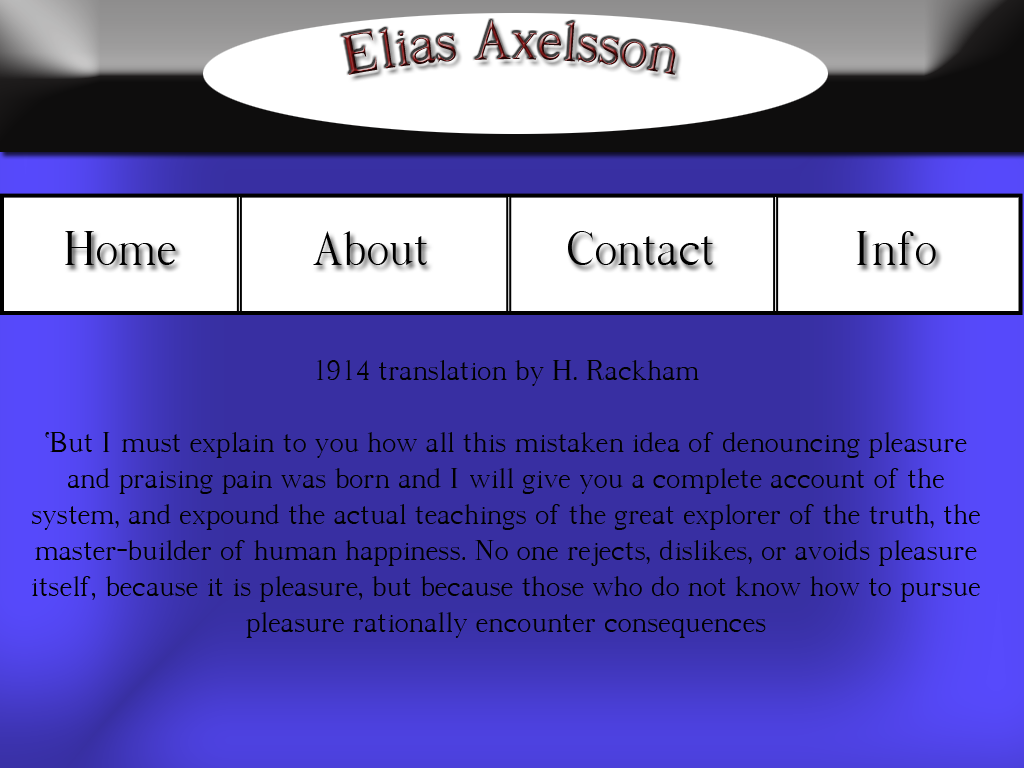
<style>
.page{position:relative;width:1024px;height:768px;background:#382fa2}
.page>*{position:absolute;margin:0}
.t1{font:56px "PanRoman"}
.t2{font:48px "PanRoman";color:#000000}
.t3{font:30px "PanRoman";color:#000000}
</style>
<div class="page">
<p class="t1" style="left:341px;top:20px;width:335px;height:55px">Elias Axelsson</p>
<p class="t2" style="left:65px;top:231px;width:111px;height:34px">Home</p>
<p class="t2" style="left:313px;top:231px;width:114px;height:34px">About</p>
<p class="t2" style="left:568px;top:231px;width:145px;height:34px">Contact</p>
<p class="t2" style="left:856px;top:231px;width:80px;height:34px">Info</p>
<p class="t3" style="left:32px;top:360px;width:948px;height:278px;text-align:center">1914 translation by H. Rackham<br><br>"But I must explain to you how all this mistaken idea of denouncing pleasure and praising pain was born and I will give you a complete account of the system, and expound the actual teachings of the great explorer of the truth, the master-builder of human happiness. No one rejects, dislikes, or avoids pleasure itself, because it is pleasure, but because those who do not know how to pursue pleasure rationally encounter consequences</p>
</div>
